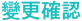
<style>
.page{position:relative;width:82px;height:21px;background:#ffffff}
.page>*{position:absolute;margin:0}
.t1{font:20px "GothicMB101Pr6N-Medium";color:#1dbdbf}
</style>
<div class="page">
<p class="t1" style="left:1px;top:1px;width:80px;height:19px">變更確認</p>
</div>
